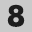
<style>
.page{position:relative;width:32px;height:32px;background:#cacaca}
.page>*{position:absolute;margin:0}
.t1{font:29.4px "Futura-Bold";color:#1d1d1d}
</style>
<div class="page">
<p class="t1" style="left:7px;top:4px;width:18px;height:23px">8</p>
</div>
